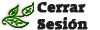
<style>
.page{position:relative;width:100px;height:30px;background:#ffffff}
.page>*{position:absolute;margin:0}
.t1{font:14px "RowdyHeavy";color:#1e1e1e;font-weight:bold}
</style>
<div class="page">
<p class="t1" style="left:37px;top:2px;width:51px;height:28px">Cerrar<br>Sesión</p>
</div>
